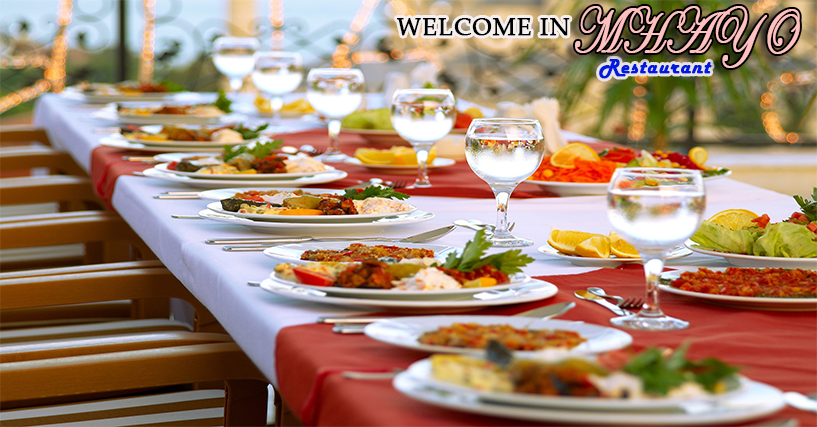
<style>
.page{position:relative;width:817px;height:427px}
.page>*{position:absolute;margin:0}
.t1{font:64.5px "EdwardianScriptITC";letter-spacing:0.04em;color:#ffc0c0;font-weight:bold;scale:0.73 1}
.t2{font:23.6px "PalatinoLinotype-Roman";letter-spacing:0.04em;color:#000000;font-weight:bold}
.t3{font:21.3px "HarlowSolid";letter-spacing:0.04em;color:#001adf;font-weight:bold}
</style>
<div class="page">
<p class="t1" style="left:575px;top:6px;width:225px;height:62px">MHAYO</p>
<p class="t2" style="left:397px;top:18px;width:173px;height:18px">WELCOME IN</p>
<p class="t3" style="left:599px;top:59px;width:113px;height:20px">Restaurant</p>
</div>
